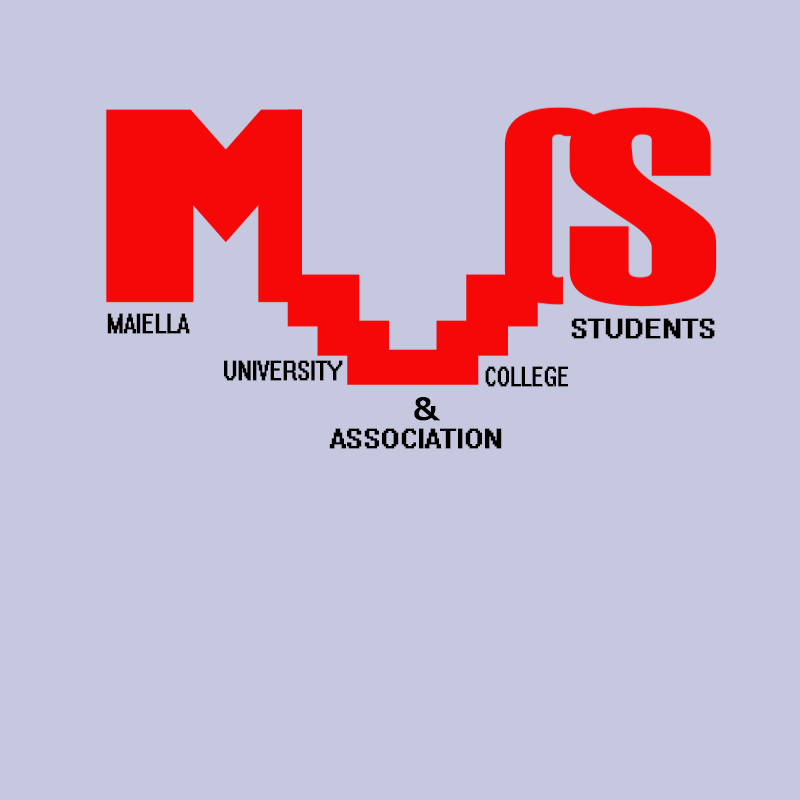
<style>
.page{position:relative;width:800px;height:800px;background:#c6c8e0}
.page>*{position:absolute;margin:0}
.t1{font:24.8px "System";color:#030000;text-transform:uppercase;font-weight:bold;scale:0.74 1}
.t2{font:24.8px "System";color:#030000;text-transform:uppercase;font-weight:bold}
.t3{font:24.8px "System";color:#030000;font-weight:bold;scale:0.75 1}
.t4{font:24.8px "System";color:#030000;font-weight:bold;scale:0.69 1}
.t5{font:31.2px "Tahoma";color:#030000;font-weight:bold;scale:1.18 1}
.t6{font:24.8px "System";color:#030000;font-weight:bold}
</style>
<div class="page">
<p class="t1" style="left:107px;top:313px;width:83px;height:21px">maiella</p>
<p class="t2" style="left:571px;top:318px;width:144px;height:21px">students</p>
<p class="t3" style="left:224px;top:360px;width:119px;height:21px">UNIVERSITY</p>
<p class="t4" style="left:485px;top:366px;width:83px;height:21px">COLLEGE</p>
<p class="t5" style="left:414px;top:397px;width:26px;height:24px">&amp;</p>
<p class="t6" style="left:329px;top:428px;width:173px;height:21px">ASSOCIATION</p>
</div>
